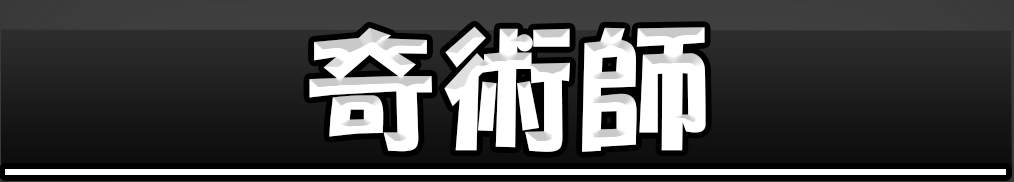
<style>
.page{position:relative;width:1014px;height:182px}
.page>*{position:absolute;margin:0}
.t1{font:130.2px "HGPSoeiKakupoptai";letter-spacing:0.05em;color:#ffffff}
</style>
<div class="page">
<p class="t1" style="left:309px;top:26px;width:397px;height:126px">奇術師</p>
</div>
